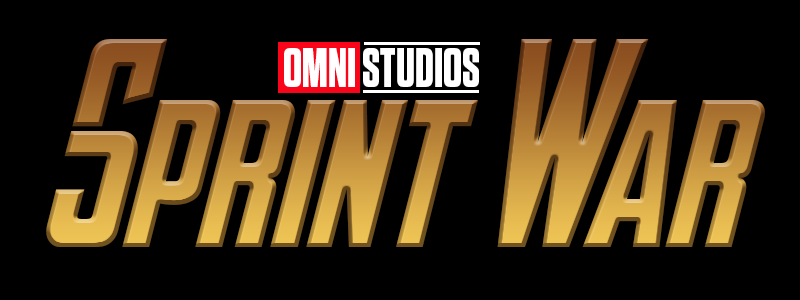
<style>
.page{position:relative;width:800px;height:300px;background:#000000}
.page>*{position:absolute;margin:0}
.t1{font:201.9px "AvengeanceHeroicAvengerNormal";scale:0.87 1}
.t2{font:54.9px "Tungsten-Bold";color:#ffffff;scale:0.87 1}
</style>
<div class="page">
<p class="t1" style="left:46px;top:39px;width:719px;height:208px">Sprint War</p>
<p class="t2" style="left:284px;top:48px;width:195px;height:39px">OMNI STUDIOS</p>
</div>
